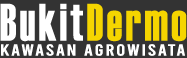
<style>
.page{position:relative;width:187px;height:58px;background:#333333}
.page>*{position:absolute;margin:0}
.t1{font:52.5px "Haettenschweiler";letter-spacing:0.075em;color:#ffffff;scale:0.83 1}
.t2{font:52.5px "Haettenschweiler";letter-spacing:0.075em;color:#f5d500;scale:0.83 1}
.t3{font:16px "Bebas-Regular";letter-spacing:0.075em;color:#ffffff;scale:1.33 1}
</style>
<div class="page">
<p class="t1" style="left:0px;top:3px;width:187px;height:39px">Bukit<span class="t2">Dermo</span></p>
<p class="t3" style="left:1px;top:44px;width:184px;height:12px">KAWASAN AGROWISATA</p>
</div>
